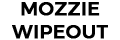
<style>
.page{position:relative;width:120px;height:40px;background:#ffffff}
.page>*{position:absolute;margin:0}
.t1{font:19px "Montserrat-Medium";color:#000000;font-weight:bold}
</style>
<div class="page">
<p class="t1" style="left:12px;top:2px;width:96px;height:37px;text-align:center">MOZZIE <br>WIPEOUT</p>
</div>
